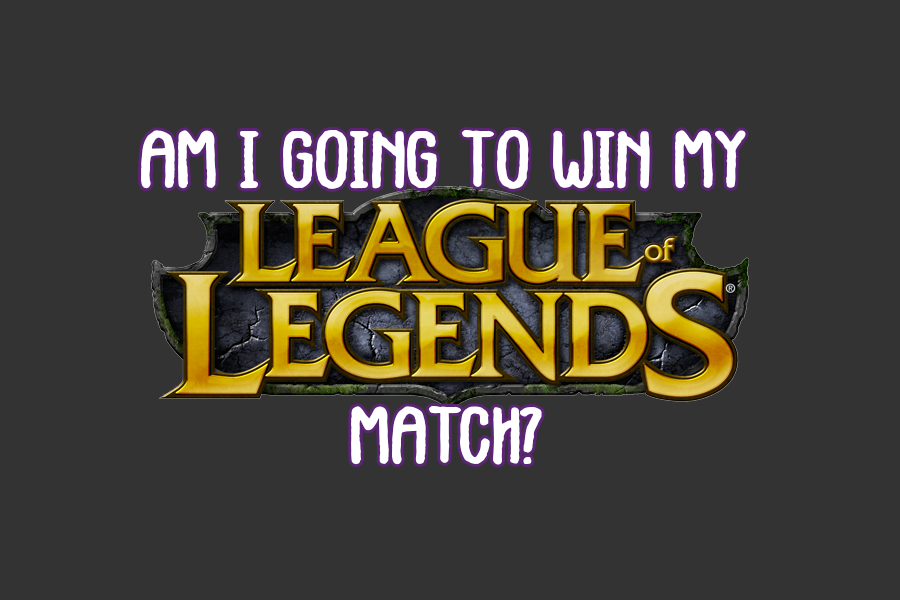
<style>
.page{position:relative;width:900px;height:600px;background:#333333}
.page>*{position:absolute;margin:0}
.t1{font:82px "Vintages";letter-spacing:-0.02em;color:#ffffff;scale:1.26 1}
</style>
<div class="page">
<p class="t1" style="left:141px;top:130px;width:605px;height:59px">Am I going to win MY</p>
<p class="t1" style="left:351px;top:406px;width:191px;height:59px">?Match</p>
</div>
